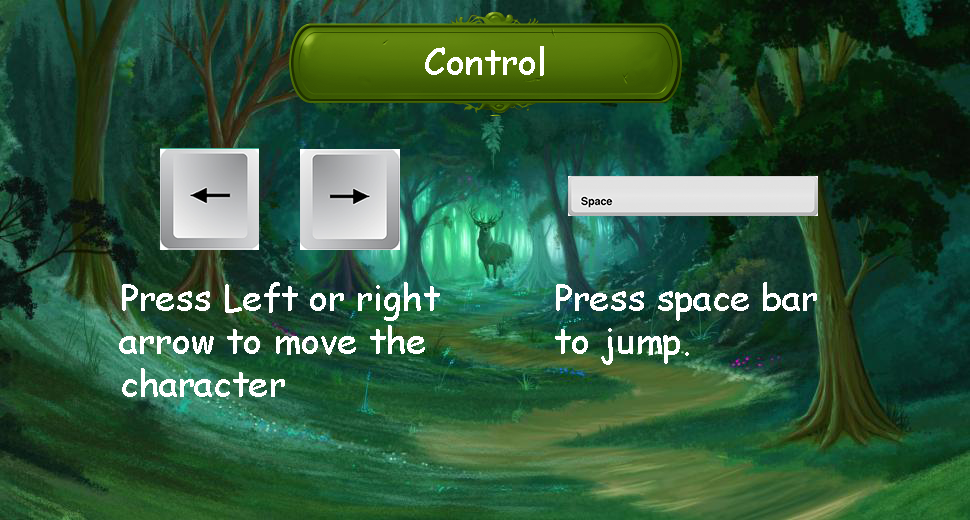
<style>
.page{position:relative;width:970px;height:520px}
.page>*{position:absolute;margin:0}
.t1{font:36px "ComicSansMS";color:#ffffff}
</style>
<div class="page">
<p class="t1" style="left:425px;top:46px;width:119px;height:30px">Control</p>
<p class="t1" style="left:119px;top:282px;width:321px;height:115px">Press Left or right arrow to move the character</p>
<p class="t1" style="left:555px;top:282px;width:262px;height:83px">Press space bar to jump.</p>
</div>
